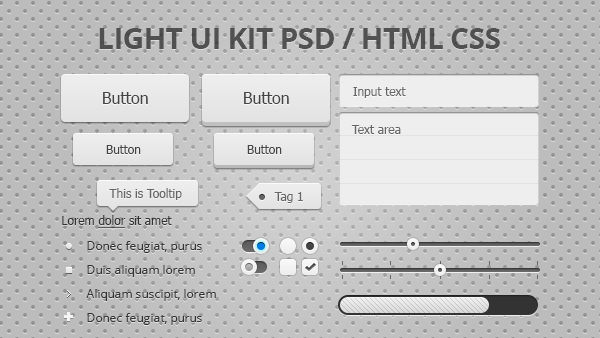
<style>
.page{position:relative;width:600px;height:338px}
.page>*{position:absolute;margin:0}
.t1{font:30px "OpenSans-Bold";letter-spacing:-0.025em;color:#515151;text-transform:uppercase}
.t2{font:12px "Tahoma";color:#666666}
.t3{font:16px "Tahoma";color:#444444}
.t4{font:12px "Tahoma";color:#444444}
.t5{font:12px "Tahoma";color:#333333}
.t6{font:12px "Tahoma";color:#333333;text-decoration:underline}
.t7{font:12px/24px "OpenSans";color:#333333}
</style>
<div class="page">
<p class="t1" style="left:99px;top:28px;width:401px;height:21px">Light UI Kit PSD / HTML CSS</p>
<p class="t2" style="left:353px;top:87px;width:53px;height:11px">Input text</p>
<p class="t3" style="left:103px;top:92px;width:45px;height:12px">Button</p>
<p class="t3" style="left:244px;top:92px;width:45px;height:12px">Button</p>
<p class="t2" style="left:351px;top:125px;width:50px;height:9px">Text area</p>
<p class="t4" style="left:106px;top:145px;width:35px;height:9px">Button</p>
<p class="t4" style="left:247px;top:145px;width:35px;height:9px">Button</p>
<p class="t2" style="left:109px;top:188px;width:73px;height:12px">This is Tooltip</p>
<p class="t2" style="left:274px;top:192px;width:29px;height:11px">Tag 1</p>
<p class="t5" style="left:62px;top:215px;width:110px;height:13px">Lorem <span class="t6">dolor </span>sit amet</p>
<p class="t7" style="left:86px;top:241px;width:130px;height:84px">Donec feugiat, purus <br>Duis aliquam lorem <br>Aliquam suscipit, lorem <br>Donec feugiat, purus</p>
</div>
